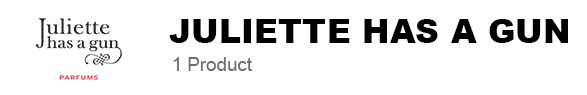
<style>
.page{position:relative;width:587px;height:95px;background:#ffffff}
.page>*{position:absolute;margin:0}
.t1{font:33.3px "Arial-Black";color:#000000}
.t2{font:18.7px "ArialMT";color:#6d6d6d}
</style>
<div class="page">
<p class="t1" style="left:169px;top:19px;width:399px;height:24px">JULIETTE HAS A GUN</p>
<p class="t2" style="left:173px;top:57px;width:79px;height:14px">1 Product</p>
</div>
